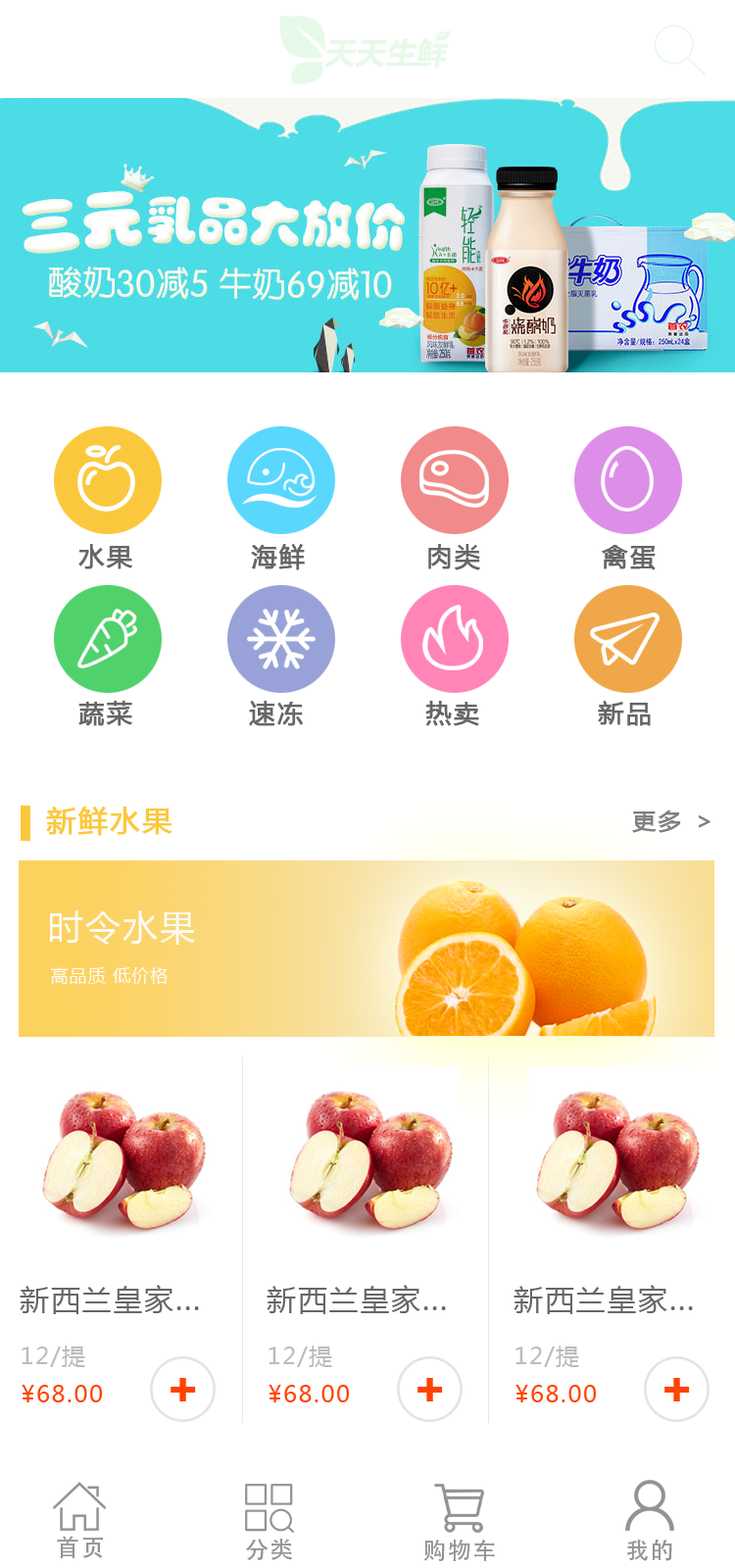
<style>
.page{position:relative;width:735px;height:1568px;background:#ffffff}
.page>*{position:absolute;margin:0}
.t1{font:25.5px "MicrosoftYaHei";letter-spacing:0.06em;color:#666666;font-weight:bold}
.t2{font:29.4px "MicrosoftYaHei";letter-spacing:0.06em;color:#fbc83d;font-weight:bold}
.t3{font:23.5px "MicrosoftYaHei";letter-spacing:0.06em;color:#7f7f7f;font-weight:bold}
.t4{font:35.3px "MicrosoftYaHei";letter-spacing:0.06em;color:#fdfaf3}
.t5{font:17.6px "MicrosoftYaHei";letter-spacing:0.06em;color:#fdfaf3}
.t6{font:29.4px "MicrosoftYaHei";letter-spacing:0.06em;color:#666666}
.t7{font:23.5px "MicrosoftYaHei";letter-spacing:0.06em;color:#bbbbbb}
.t8{font:23.5px "MicrosoftYaHei";letter-spacing:0.06em;color:#ff4400}
.t9{font:49px "Arial-BoldMT";letter-spacing:0.06em;color:#ff4300}
.t10{font:23.5px "AdobeHeitiStd-Regular";letter-spacing:0.06em;color:#949392}
</style>
<div class="page">
<p class="t1" style="left:78px;top:544px;width:54px;height:25px">水果</p>
<p class="t1" style="left:251px;top:544px;width:54px;height:26px">海鲜</p>
<p class="t1" style="left:428px;top:544px;width:52px;height:26px">肉类</p>
<p class="t1" style="left:602px;top:545px;width:54px;height:25px">禽蛋</p>
<p class="t1" style="left:78px;top:701px;width:54px;height:25px">蔬菜</p>
<p class="t1" style="left:249px;top:701px;width:54px;height:25px">速冻</p>
<p class="t1" style="left:425px;top:701px;width:54px;height:25px">热卖</p>
<p class="t1" style="left:598px;top:701px;width:53px;height:25px">新品</p>
<p class="t2" style="left:46px;top:807px;width:126px;height:29px">新鲜水果</p>
<p class="t3" style="left:632px;top:810px;width:78px;height:23px">更多 ＞</p>
<p class="t4" style="left:50px;top:910px;width:145px;height:35px">时令水果</p>
<p class="t5" style="left:50px;top:967px;width:118px;height:18px">高品质 低价格</p>
<p class="t6" style="left:20px;top:1285px;width:179px;height:29px">新西兰皇家...</p>
<p class="t6" style="left:267px;top:1285px;width:179px;height:29px">新西兰皇家...</p>
<p class="t6" style="left:514px;top:1285px;width:179px;height:29px">新西兰皇家...</p>
<p class="t7" style="left:22px;top:1346px;width:63px;height:21px">12/提</p>
<p class="t7" style="left:269px;top:1346px;width:63px;height:21px">12/提</p>
<p class="t7" style="left:515px;top:1346px;width:64px;height:21px">12/提</p>
<p class="t8" style="left:22px;top:1385px;width:80px;height:17px">¥68.00</p>
<p class="t9" style="left:171px;top:1378px;width:25px;height:23px">+</p>
<p class="t8" style="left:269px;top:1385px;width:80px;height:17px">¥68.00</p>
<p class="t9" style="left:417px;top:1378px;width:26px;height:23px">+</p>
<p class="t8" style="left:515px;top:1385px;width:81px;height:17px">¥68.00</p>
<p class="t9" style="left:664px;top:1378px;width:26px;height:23px">+</p>
<p class="t10" style="left:57px;top:1536px;width:46px;height:22px">首页</p>
<p class="t10" style="left:246px;top:1539px;width:46px;height:21px">分类</p>
<p class="t10" style="left:423px;top:1540px;width:72px;height:21px">购物车</p>
<p class="t10" style="left:627px;top:1540px;width:45px;height:21px">我的</p>
</div>
